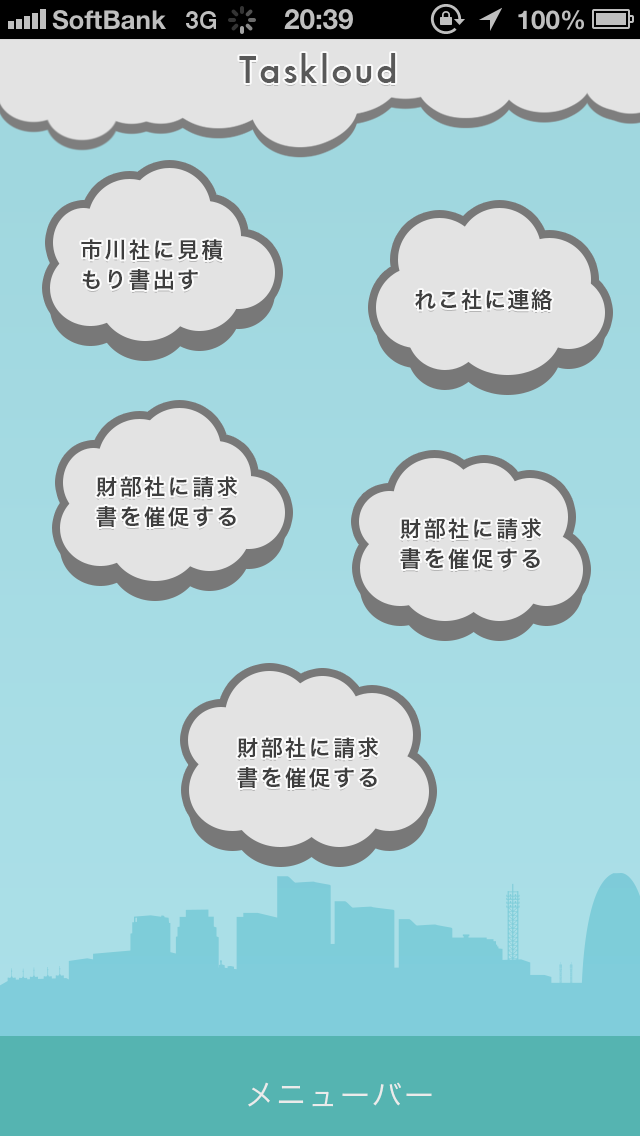
<style>
.page{position:relative;width:640px;height:1136px;background:#e3e3e3}
.page>*{position:absolute;margin:0}
.t1{font:36px "Futura-Medium";letter-spacing:0.06em;color:#595959}
.t2{font:22px/30px "HiraKakuPro-W6";letter-spacing:0.1em;color:#3f3f3f}
.t3{font:22px "HiraKakuPro-W6";letter-spacing:0.06em;color:#3f3f3f}
.t4{font:30px "HiraKakuPro-W3";letter-spacing:0.06em;color:#ebebeb}
</style>
<div class="page">
<p class="t1" style="left:239px;top:53px;width:157px;height:30px">Taskloud</p>
<p class="t2" style="left:81px;top:239px;width:142px;height:51px">市川社に見積<br>もり書出す</p>
<p class="t3" style="left:415px;top:288px;width:138px;height:23px">れこ社に連絡</p>
<p class="t2" style="left:96px;top:476px;width:142px;height:51px">財部社に請求<br>書を催促する</p>
<p class="t2" style="left:400px;top:518px;width:142px;height:51px">財部社に請求<br>書を催促する</p>
<p class="t2" style="left:237px;top:737px;width:142px;height:51px">財部社に請求<br>書を催促する</p>
<p class="t4" style="left:248px;top:1082px;width:184px;height:25px">メニューバー</p>
</div>
